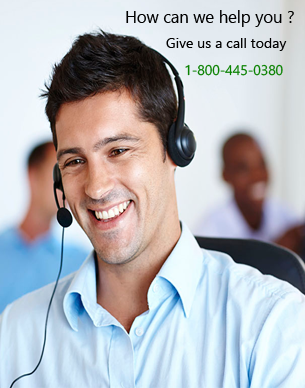
<style>
.page{position:relative;width:305px;height:388px}
.page>*{position:absolute;margin:0}
.t1{font:16.7px "SegoeUI";color:#000000}
.t2{font:14.2px "SegoeUI";color:#010101}
.t3{font:14px "SegoeUI";color:#0a8201}
</style>
<div class="page">
<p class="t1" style="left:126px;top:10px;width:168px;height:17px">How can we help you ?</p>
<p class="t2" style="left:166px;top:38px;width:121px;height:13px">Give us a call today</p>
<p class="t3" style="left:185px;top:64px;width:98px;height:12px">1-800-445-0380</p>
</div>
